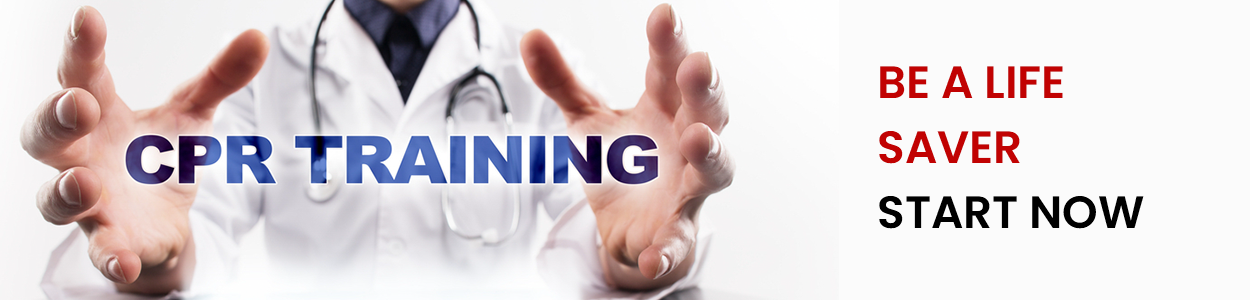
<style>
.page{position:relative;width:1250px;height:300px;background:#fbfbfb}
.page>*{position:absolute;margin:0}
.t1{font:45.2px/65px "Poppins-SemiBold";color:#c10202}
.t2{font:45.2px/65px "Poppins-SemiBold";color:#000000}
</style>
<div class="page">
<p class="t1" style="left:879px;top:66px;width:265px;height:163px">BE A LIFE <br>SAVER <br><span class="t2">START NOW</span></p>
</div>
